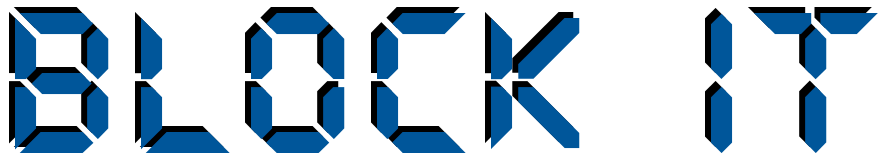
<style>
.page{position:relative;width:889px;height:167px;background:#ffffff}
.page>*{position:absolute;margin:0}
.t1{font:200px "QuartzMS"}
.t2{font:200px "QuartzMS";color:#00569a}
</style>
<div class="page">
<p class="t1" style="left:9px;top:7px;width:863px;height:140px">block  it</p>
<p class="t2" style="left:15px;top:13px;width:863px;height:140px">block  it</p>
</div>
